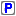
<style>
.page{position:relative;width:16px;height:16px;background:#ffffff}
.page>*{position:absolute;margin:0}
.t1{font:14px "Arial-BoldMT";color:#0000ff}
</style>
<div class="page">
<p class="t1" style="left:5px;top:3px;width:7px;height:10px">P</p>
</div>
